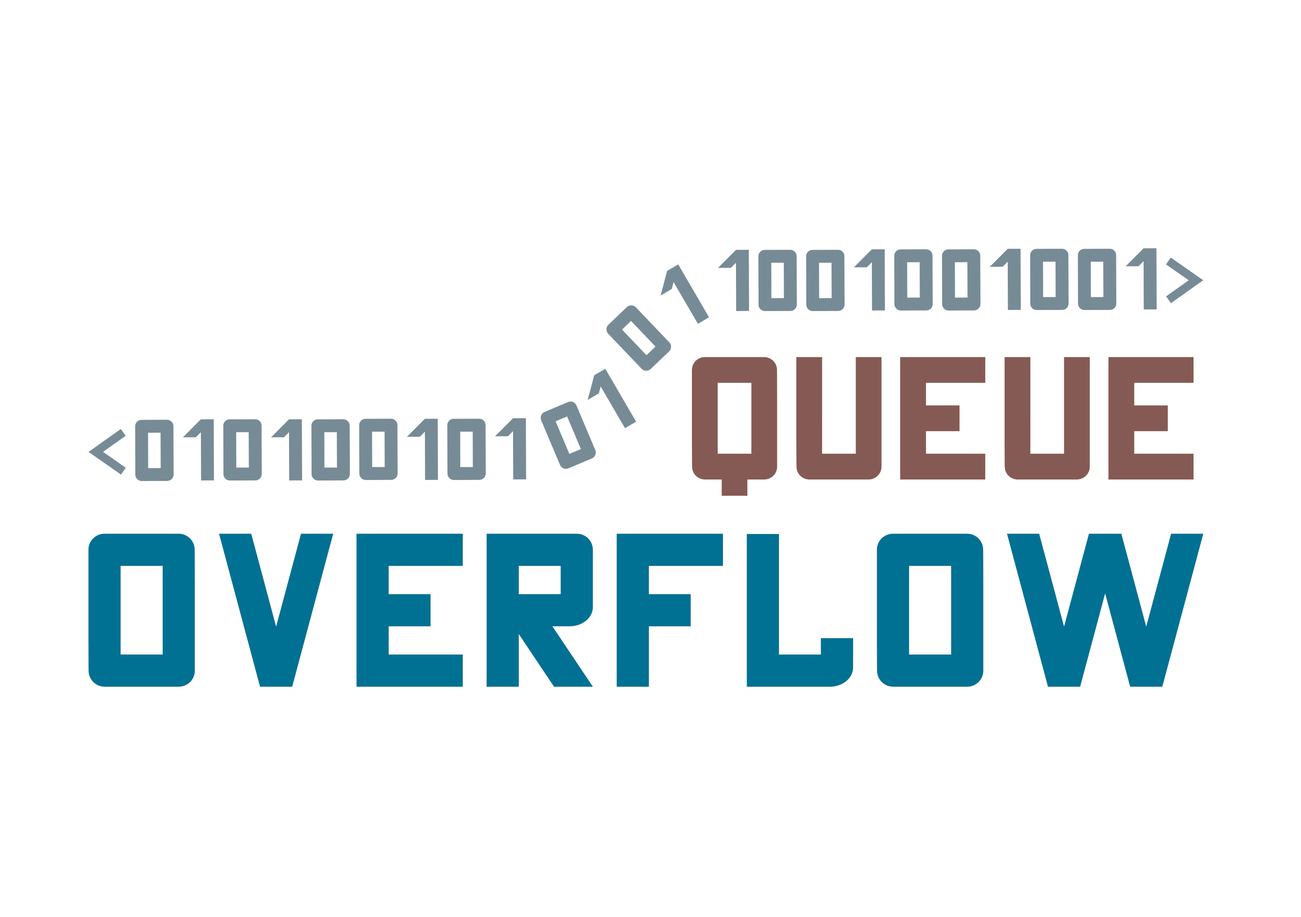
<style>
.page{position:relative;width:1301px;height:917px;background:#ffffff}
.page>*{position:absolute;margin:0}
.t1{font:87.3px "THECHAMPRegular";color:#778b96}
.t2{font:87.4px "THECHAMPRegular";color:#778b96}
.t3{font:174.8px "THECHAMPRegular";color:#865a54}
.t4{font:218.5px "THECHAMPRegular";color:#007193}
</style>
<div class="page">
<p class="t1" style="left:717px;top:248px;width:486px;height:63px">1001001001&gt;</p>
<p class="t2" style="left:660px;top:264px;width:49px;height:60px;rotate:-30deg">1</p>
<p class="t2" style="left:606px;top:305px;width:65px;height:66px;rotate:-44deg">0</p>
<p class="t3" style="left:691px;top:357px;width:503px;height:139px">Queue</p>
<p class="t2" style="left:587px;top:369px;width:49px;height:59px;rotate:-30deg">1</p>
<p class="t2" style="left:540px;top:401px;width:56px;height:68px;rotate:-23deg">0</p>
<p class="t1" style="left:88px;top:418px;width:438px;height:63px">&lt;010100101</p>
<p class="t4" style="left:88px;top:533px;width:1115px;height:154px">overflow</p>
</div>
